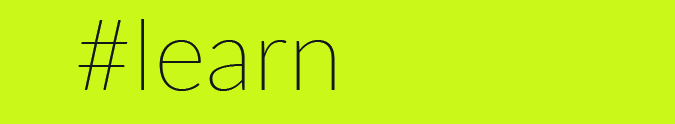
<style>
.page{position:relative;width:675px;height:124px;background:#caf919}
.page>*{position:absolute;margin:0}
.t1{font:100px "Lato-Thin";color:#141819}
</style>
<div class="page">
<p class="t1" style="left:78px;top:19px;width:257px;height:72px">#learn</p>
</div>
